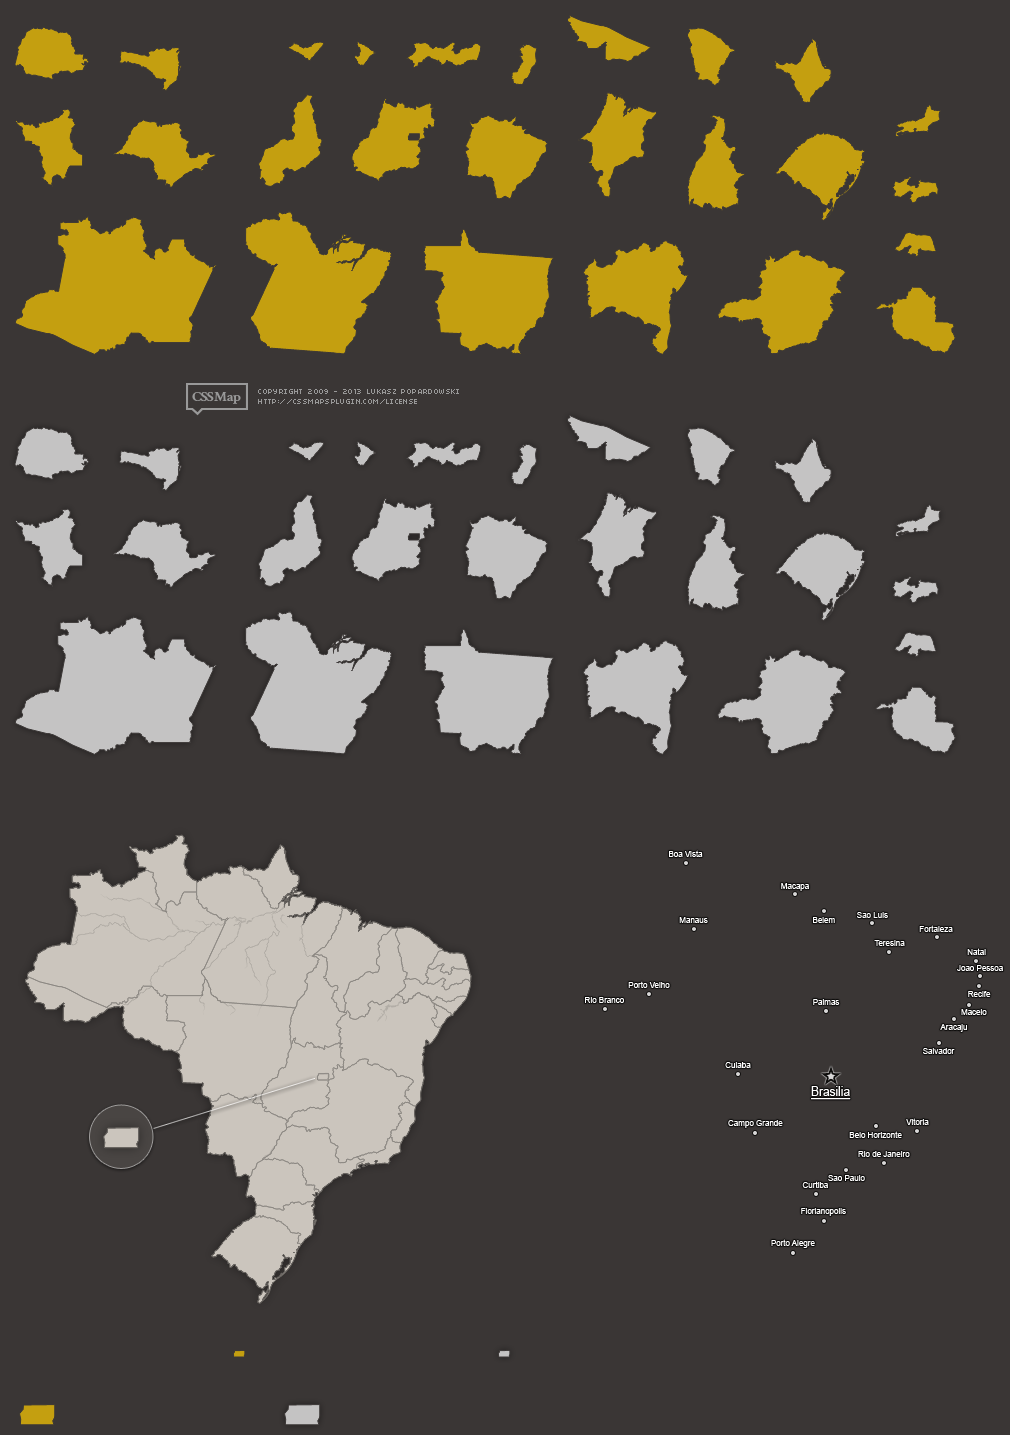
<style>
.page{position:relative;width:1010px;height:1435px;background:#3a3635}
.page>*{position:absolute;margin:0}
.t1{font:8px "ArialMT";color:#ffffff}
.t2{font:12.7px "ArialMT";color:#ffffff;text-decoration:underline;scale:0.94 1}
</style>
<div class="page">
<p class="t1" style="left:669px;top:850px;width:34px;height:7px">Boa Vista</p>
<p class="t1" style="left:781px;top:883px;width:28px;height:8px">Macapa</p>
<p class="t1" style="left:679px;top:917px;width:29px;height:6px">Manaus</p>
<p class="t1" style="left:813px;top:917px;width:22px;height:6px">Belem</p>
<p class="t1" style="left:857px;top:912px;width:31px;height:6px">Sao Luis</p>
<p class="t1" style="left:919px;top:925px;width:34px;height:7px">Fortaleza</p>
<p class="t1" style="left:874px;top:940px;width:31px;height:6px">Teresina</p>
<p class="t1" style="left:967px;top:948px;width:19px;height:7px">Natal</p>
<p class="t1" style="left:957px;top:965px;width:46px;height:6px">Joao Pessoa</p>
<p class="t1" style="left:628px;top:981px;width:42px;height:7px">Porto Velho</p>
<p class="t1" style="left:585px;top:997px;width:39px;height:6px">Rio Branco</p>
<p class="t1" style="left:813px;top:999px;width:27px;height:6px">Palmas</p>
<p class="t1" style="left:968px;top:991px;width:23px;height:6px">Recife</p>
<p class="t1" style="left:961px;top:1009px;width:26px;height:6px">Maceio</p>
<p class="t1" style="left:940px;top:1024px;width:27px;height:8px">Aracaju</p>
<p class="t1" style="left:923px;top:1048px;width:32px;height:6px">Salvador</p>
<p class="t1" style="left:725px;top:1062px;width:26px;height:6px">Cuiaba</p>
<p class="t2" style="left:811px;top:1086px;width:40px;height:14px">Brasilia</p>
<p class="t1" style="left:728px;top:1120px;width:55px;height:8px">Campo Grande</p>
<p class="t1" style="left:906px;top:1118px;width:23px;height:7px">Vitoria</p>
<p class="t1" style="left:849px;top:1131px;width:53px;height:7px">Belo Horizonte</p>
<p class="t1" style="left:858px;top:1151px;width:52px;height:6px">Rio de Janeiro</p>
<p class="t1" style="left:802px;top:1181px;width:26px;height:7px">Curtiba</p>
<p class="t1" style="left:828px;top:1175px;width:37px;height:6px">Sao Paulo</p>
<p class="t1" style="left:801px;top:1208px;width:45px;height:8px">Florianopolis</p>
<p class="t1" style="left:771px;top:1239px;width:44px;height:9px">Porto Alegre</p>
</div>
